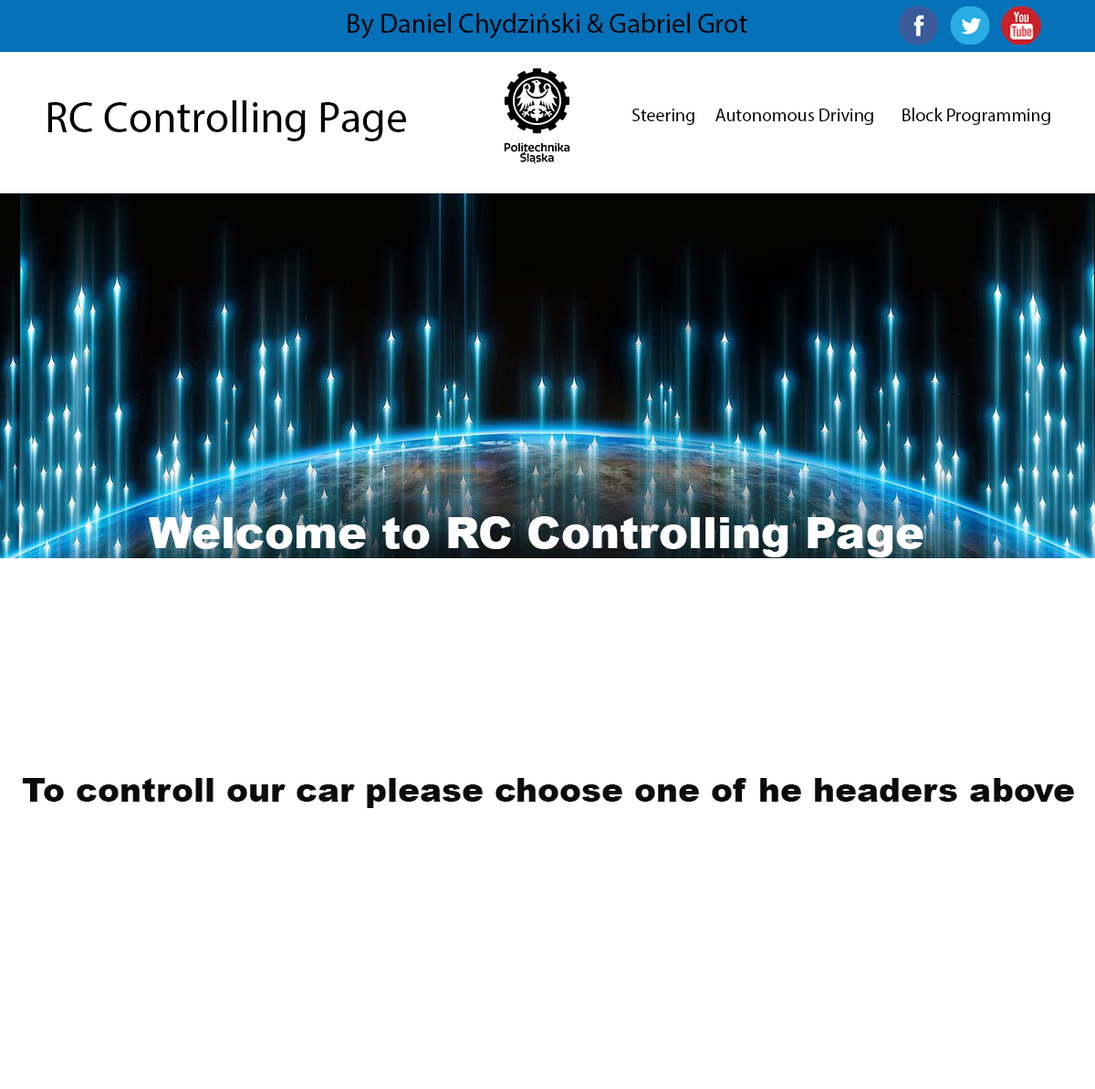
<style>
.page{position:relative;width:1095px;height:1089px;background:#ffffff}
.page>*{position:absolute;margin:0}
.t1{font:27.4px "MyriadPro-Regular";color:#000000}
.t2{font:43.8px "MyriadPro-Regular";color:#000000}
.t3{font:18.2px "MyriadPro-Regular";color:#000000}
.t4{font:43.8px "Arial-Black";color:#ffffff}
.t5{font:32.8px "Arial-Black";color:#0b0b0c}
</style>
<div class="page">
<p class="t1" style="left:348px;top:13px;width:399px;height:26px">By Daniel Chydziński &amp; Gabriel Grot</p>
<p class="t2" style="left:47px;top:100px;width:359px;height:41px">RC Controlling Page</p>
<p class="t3" style="left:632px;top:108px;width:418px;height:17px">Steering     Autonomous Driving       Block Programming</p>
<p class="t4" style="left:149px;top:516px;width:774px;height:41px">Welcome to RC Controlling Page</p>
<p class="t5" style="left:22px;top:778px;width:1052px;height:30px">To controll our car please choose one of he headers above</p>
</div>
